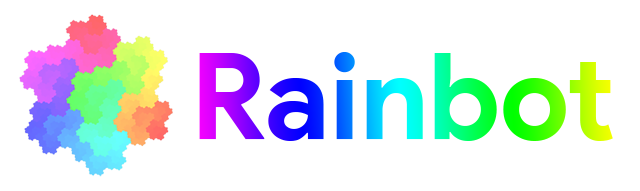
<style>
.page{position:relative;width:640px;height:191px;background:#ffffff}
.page>*{position:absolute;margin:0}
.t1{font:119.7px "ProductSans-Bold"}
</style>
<div class="page">
<p class="t1" style="left:199px;top:52px;width:414px;height:89px">Rainbot</p>
</div>
